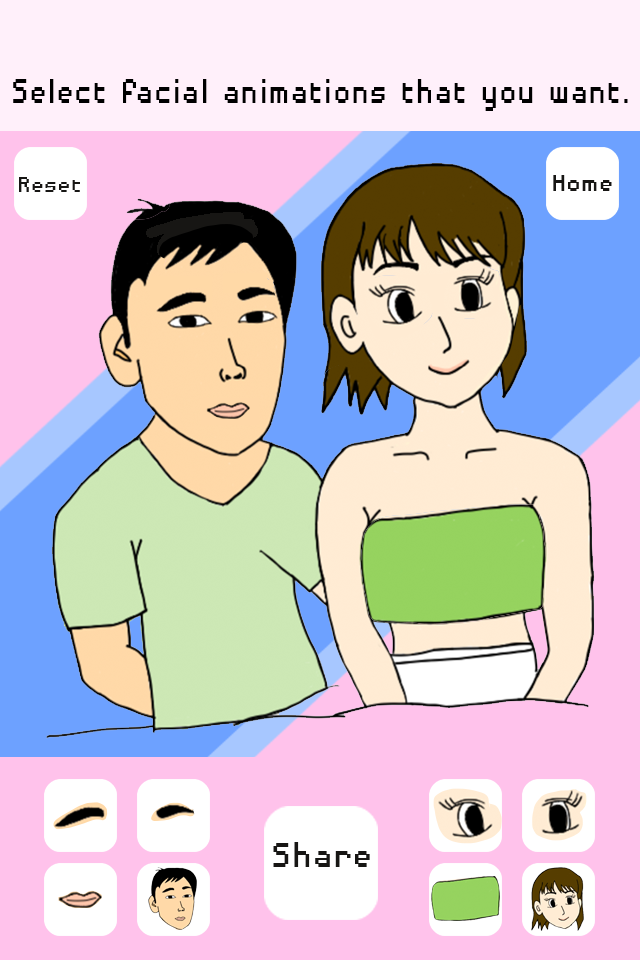
<style>
.page{position:relative;width:640px;height:960px;background:#ffc2eb}
.page>*{position:absolute;margin:0}
.t1{font:45.2px "DisposableDroidBB";color:#000000;scale:0.83 1}
.t2{font:27.6px "DisposableDroidBB";color:#171614}
.t3{font:30.6px "DisposableDroidBB";color:#171614}
.t4{font:46.2px "DisposableDroidBB";color:#171614;scale:0.91 1}
</style>
<div class="page">
<p class="t1" style="left:13px;top:79px;width:615px;height:32px">Select facial animations that you want.</p>
<p class="t2" style="left:19px;top:177px;width:61px;height:15px">Reset</p>
<p class="t3" style="left:553px;top:175px;width:59px;height:16px">Home</p>
<p class="t4" style="left:273px;top:842px;width:97px;height:25px">Share</p>
</div>
